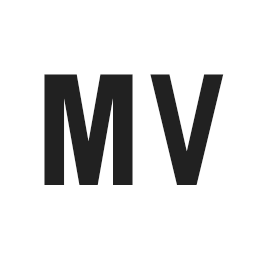
<style>
.page{position:relative;width:256px;height:256px;background:#ffffff}
.page>*{position:absolute;margin:0}
.t1{font:140px "Toplineregular";color:#212121}
</style>
<div class="page">
<p class="t1" style="left:44px;top:74px;width:180px;height:111px">MV</p>
</div>
